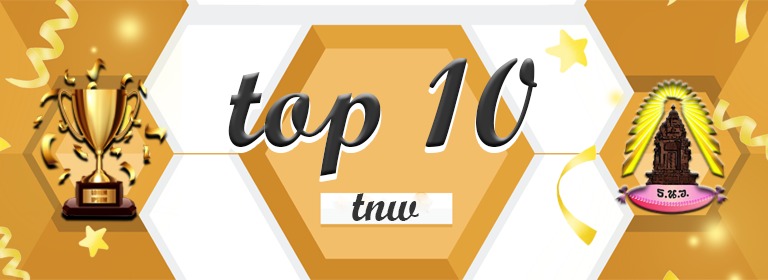
<style>
.page{position:relative;width:768px;height:280px}
.page>*{position:absolute;margin:0}
.t1{font:125px "ScriptMTBold";letter-spacing:0.005em;color:#333333}
.t2{font:45.8px "ScriptMTBold";letter-spacing:0.005em;color:#333333}
</style>
<div class="page">
<p class="t1" style="left:228px;top:58px;width:309px;height:118px">top 10</p>
<p class="t2" style="left:352px;top:193px;width:67px;height:28px">tnw</p>
</div>
